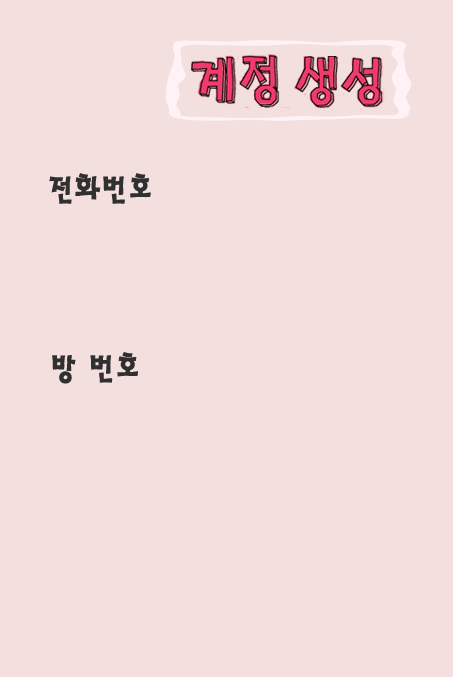
<style>
.page{position:relative;width:453px;height:677px;background:#f3dfde}
.page>*{position:absolute;margin:0}
.t1{font:33.3px "HaanSaleB";color:#303030}
</style>
<div class="page">
<p class="t1" style="left:49px;top:173px;width:102px;height:31px">전화번호</p>
<p class="t1" style="left:52px;top:352px;width:86px;height:32px">방 번호</p>
</div>
